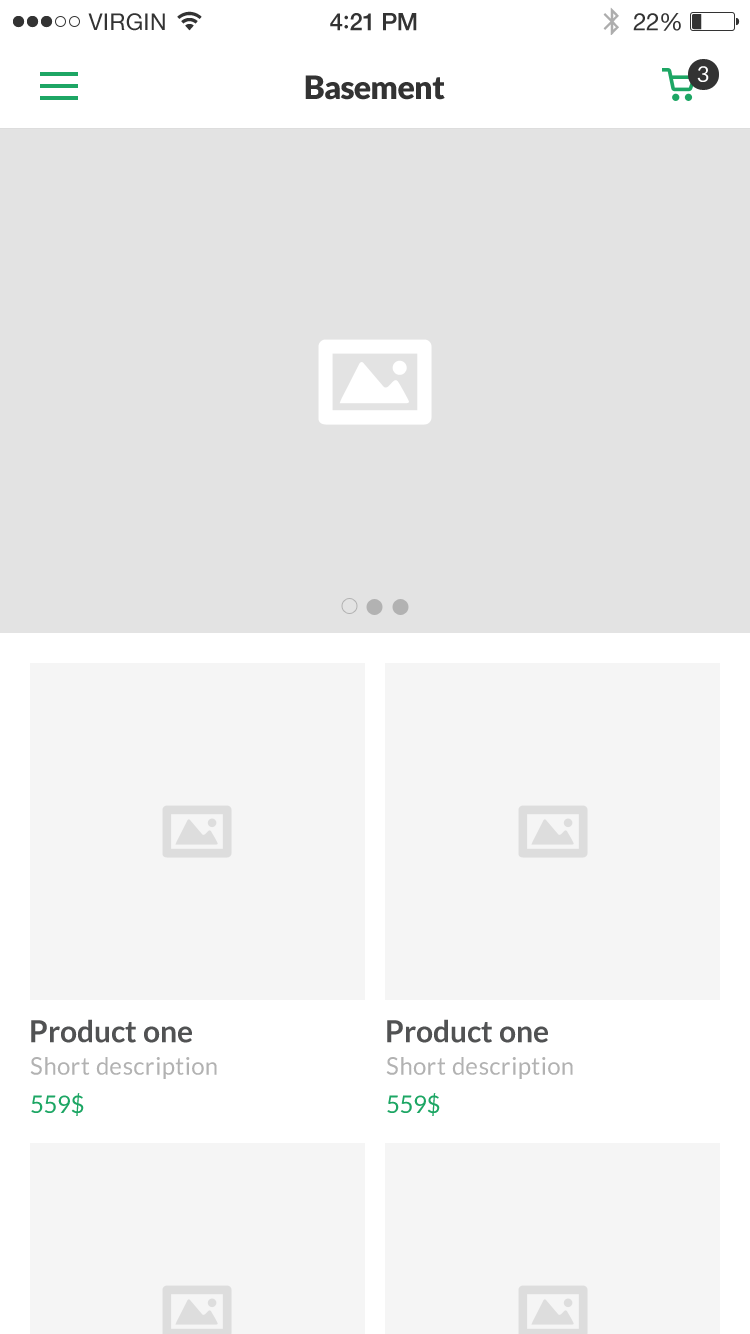
<style>
.page{position:relative;width:750px;height:1334px;background:#e3e3e3}
.page>*{position:absolute;margin:0}
.t1{font:32px "Lato-Black";letter-spacing:-0.02em;color:#333333}
.t2{font:22px "Lato-Regular";letter-spacing:0.02em;color:#ffffff}
.t3{font:30px "Lato-Bold";color:#515253}
.t4{font:24px "Lato-Regular";letter-spacing:0.02em;color:#b2b2b2}
.t5{font:24px "Lato-Regular";letter-spacing:-0.02em;color:#1da664}
</style>
<div class="page">
<p class="t1" style="left:305px;top:75px;width:140px;height:25px">Basement</p>
<p class="t2" style="left:697px;top:66px;width:12px;height:16px">3</p>
<p class="t3" style="left:31px;top:1019px;width:161px;height:24px">Product one</p>
<p class="t3" style="left:387px;top:1019px;width:161px;height:24px">Product one</p>
<p class="t4" style="left:30px;top:1057px;width:187px;height:22px">Short description</p>
<p class="t4" style="left:386px;top:1057px;width:187px;height:22px">Short description</p>
<p class="t5" style="left:31px;top:1093px;width:53px;height:23px">559$</p>
<p class="t5" style="left:387px;top:1093px;width:53px;height:23px">559$</p>
</div>
